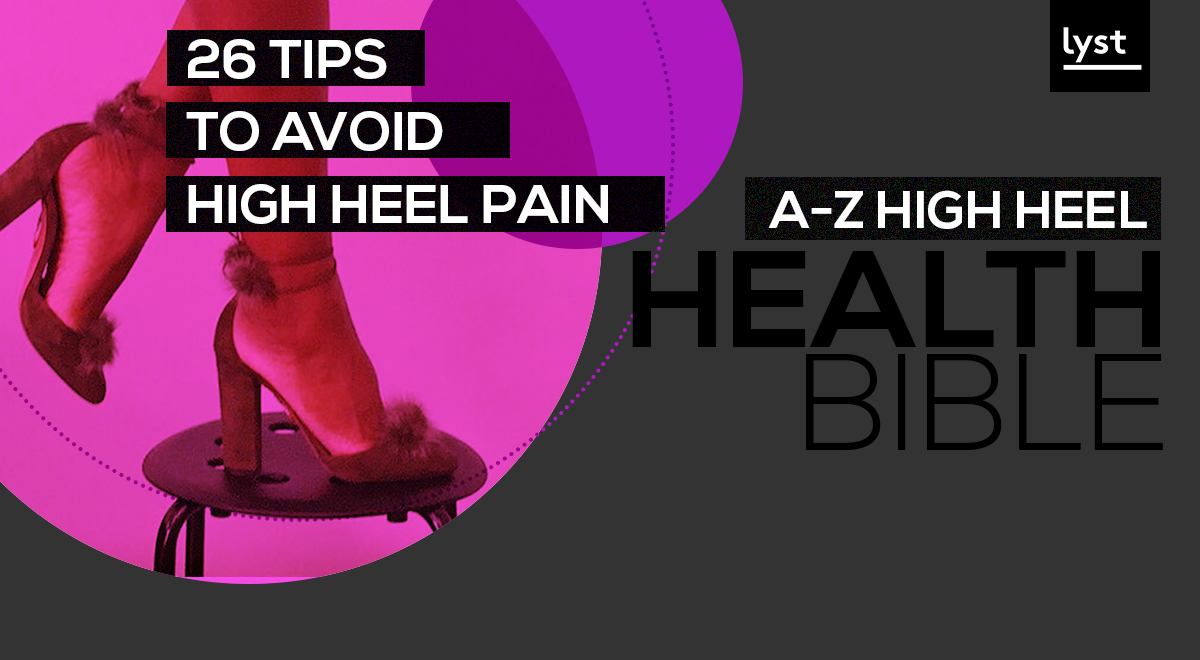
<style>
.page{position:relative;width:1200px;height:660px;background:#333333}
.page>*{position:absolute;margin:0}
.t1{font:54.3px/72.5px "NexaBold";color:#ffffff}
.t2{font:52.3px "NexaBold";color:#ffffff}
.t3{font:137.6px/102.8px "NexaBold";color:#000000}
.t4{font:137.6px/102.8px "NexaLight";color:#000000}
</style>
<div class="page">
<p class="t1" style="left:186px;top:38px;width:422px;height:186px">26 TIPS <br>TO AVOID<br>HIGH HEEL PAIN</p>
<p class="t2" style="left:768px;top:190px;width:379px;height:39px">A-Z HIGH HEEL</p>
<p class="t3" style="left:632px;top:251px;width:531px;height:200px;text-align:right">HEALTH<br><span class="t4">BIBLE</span></p>
</div>
